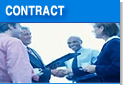
<style>
.page{position:relative;width:123px;height:85px}
.page>*{position:absolute;margin:0}
.t1{font:12px "H2gtrE";letter-spacing:-0.025em;color:#ffffff;font-weight:bold;scale:0.8 1}
</style>
<div class="page">
<p class="t1" style="left:5px;top:5px;width:60px;height:11px">CONTRACT</p>
</div>
